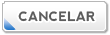
<style>
.page{position:relative;width:110px;height:35px;background:#ffffff}
.page>*{position:absolute;margin:0}
.t1{font:12.9px "nevis-Bold";color:#5c5c5c}
</style>
<div class="page">
<p class="t1" style="left:18px;top:11px;width:77px;height:11px">CANCELAR</p>
</div>
